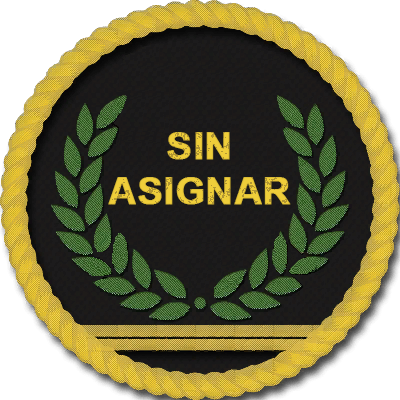
<style>
.page{position:relative;width:400px;height:400px}
.page>*{position:absolute;margin:0}
.t1{font:38px "Arial-BoldMT";color:#efce3a;font-weight:bold}
</style>
<div class="page">
<p class="t1" style="left:108px;top:132px;width:183px;height:73px;text-align:center">SIN<br>ASIGNAR</p>
</div>
